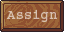
<style>
.page{position:relative;width:64px;height:32px;background:#8f5030}
.page>*{position:absolute;margin:0}
.t1{font:14px "Courier-Bold";color:#d8c2b0}
</style>
<div class="page">
<p class="t1" style="left:7px;top:10px;width:50px;height:12px">Assign</p>
</div>
